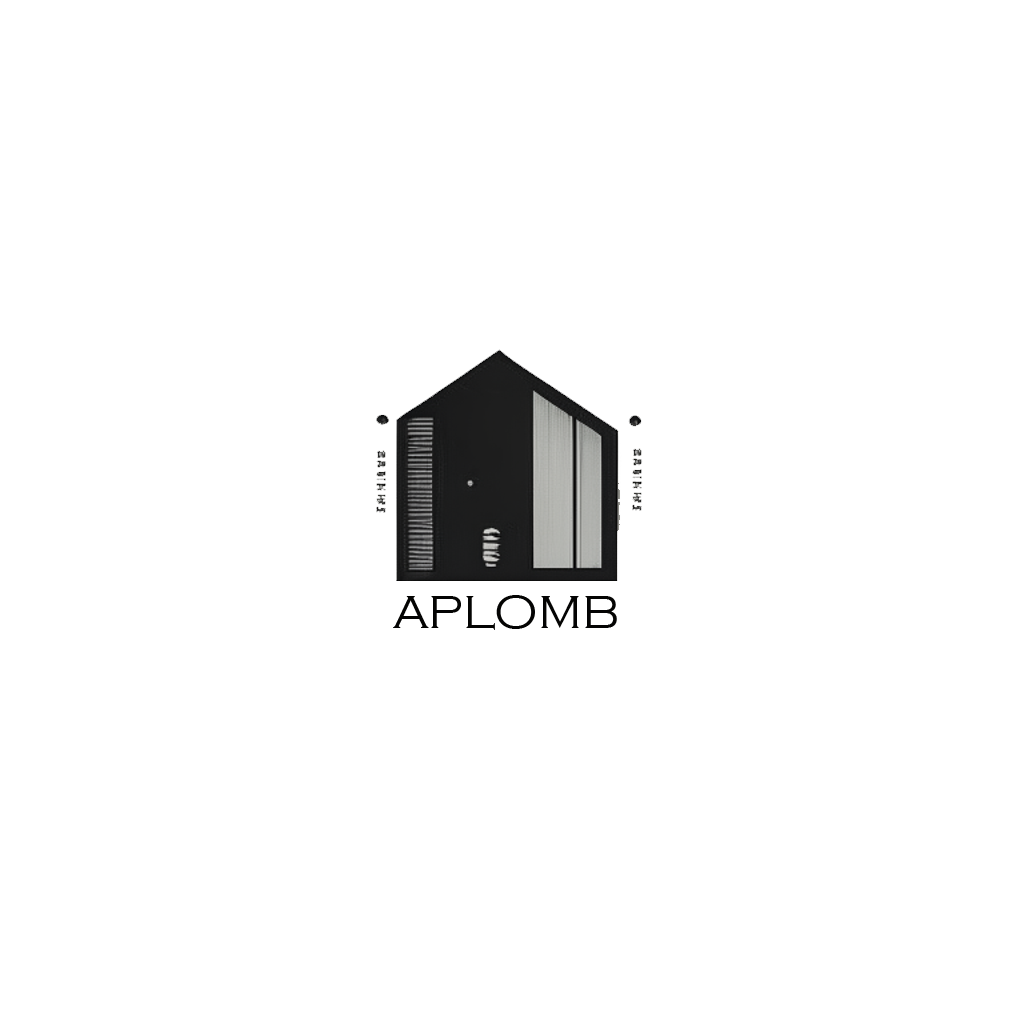
<style>
.page{position:relative;width:1024px;height:1024px;background:#ffffff}
.page>*{position:absolute;margin:0}
.t1{font:48px "CopperplateGothic-Light";color:#040403}
</style>
<div class="page">
<p class="t1" style="left:393px;top:595px;width:224px;height:35px">APLOMB</p>
</div>
